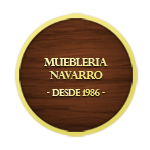
<style>
.page{position:relative;width:150px;height:150px;background:#ffffff}
.page>*{position:absolute;margin:0}
.t1{font:10.8px "PerpetuaTitlingMT-Bold";letter-spacing:-0.05em}
.t2{font:9px "PerpetuaTitlingMT-Bold";letter-spacing:-0.05em}
</style>
<div class="page">
<p class="t1" style="left:44px;top:58px;width:64px;height:21px;text-align:center">muebleria<br>Navarro</p>
<p class="t2" style="left:47px;top:89px;width:58px;height:7px">- desde 1986 -</p>
</div>
